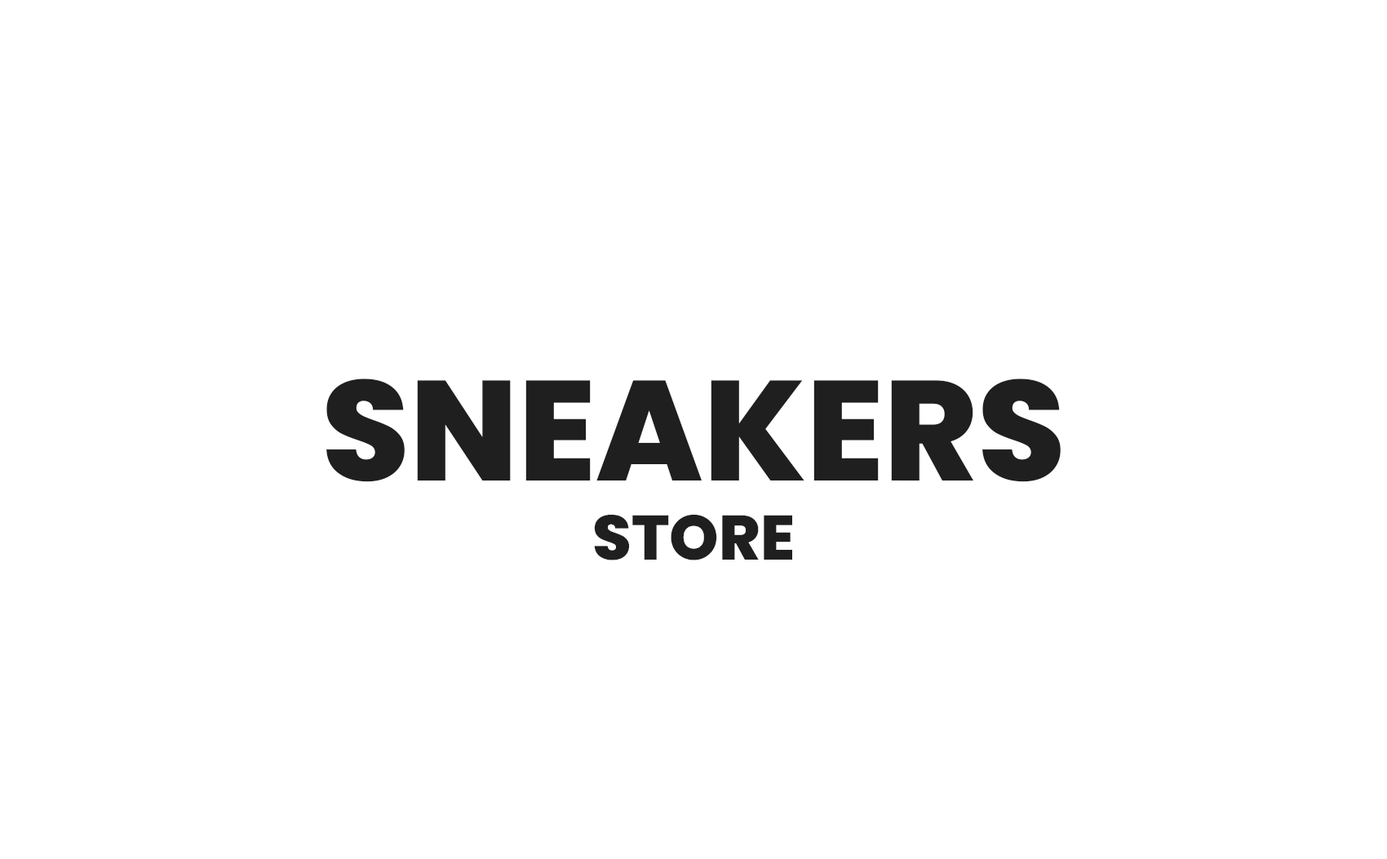
<style>
.page{position:relative;width:1387px;height:859px;background:#ffffff}
.page>*{position:absolute;margin:0}
.t1{font:142px "Poppins-ExtraBold";color:#1f1f1f;text-transform:uppercase}
.t2{font:62.8px "Poppins-ExtraBold";color:#1f1f1f;text-transform:uppercase}
</style>
<div class="page">
<p class="t1" style="left:326px;top:379px;width:735px;height:103px">Sneakers</p>
<p class="t2" style="left:594px;top:514px;width:198px;height:47px">STORE</p>
</div>
